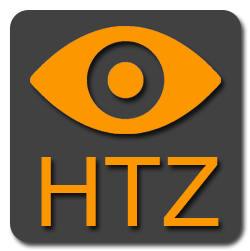
<style>
.page{position:relative;width:250px;height:251px;background:#414141}
.page>*{position:absolute;margin:0}
.t1{font:96px "ArialMT";color:#fd9700}
</style>
<div class="page">
<p class="t1" style="left:41px;top:157px;width:178px;height:69px">HTZ</p>
</div>
